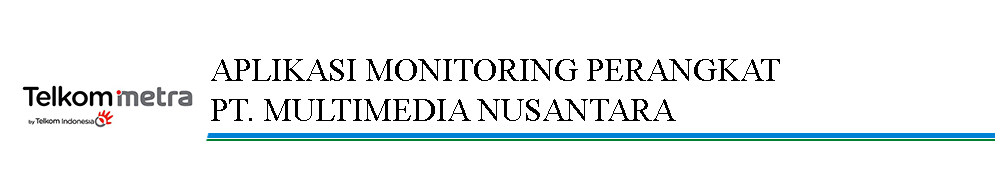
<style>
.page{position:relative;width:1004px;height:175px;background:#ffffff}
.page>*{position:absolute;margin:0}
.t1{font:33.3px "TimesNewRomanPSMT";color:#000000}
</style>
<div class="page">
<p class="t1" style="left:211px;top:59px;width:569px;height:62px">APLIKASI MONITORING PERANGKAT <br>PT. MULTIMEDIA NUSANTARA</p>
</div>
